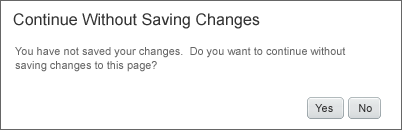
<style>
.page{position:relative;width:402px;height:131px;background:#ffffff}
.page>*{position:absolute;margin:0}
.t1{font:16px "ArialMT";letter-spacing:0.005em;color:#333333}
.t2{font:11px/14px "ArialMT";color:#666666}
.t3{font:11px "ArialMT";color:#303030}
</style>
<div class="page">
<p class="t1" style="left:13px;top:13px;width:247px;height:16px">Continue Without Saving Changes</p>
<p class="t2" style="left:15px;top:47px;width:331px;height:25px">You have not saved your changes.  Do you want to continue without <br>saving changes to this page?</p>
<p class="t3" style="left:315px;top:104px;width:18px;height:8px">Yes</p>
<p class="t3" style="left:359px;top:104px;width:13px;height:8px">No</p>
</div>
